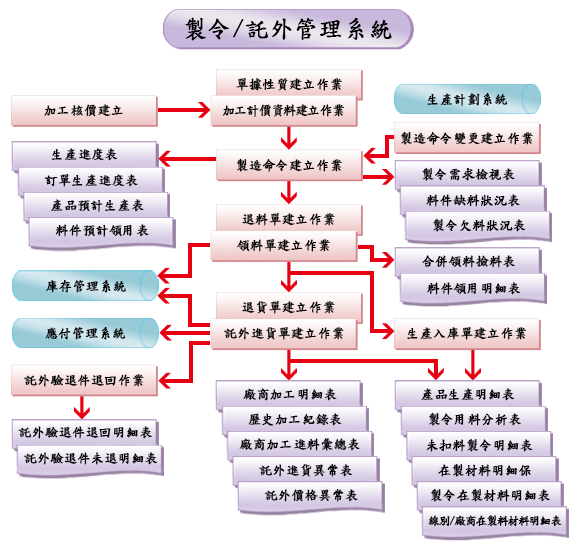
<style>
.page{position:relative;width:577px;height:545px;background:#ffffff}
.page>*{position:absolute;margin:0}
.t1{font:24px "DFKaiShu-SB-Estd-BF";color:#000000;font-weight:bold}
.t2{font:13.1px "DFKaiShu-SB-Estd-BF";color:#000000;font-weight:bold}
.t3{font:13.1px "DFKaiShu-SB-Estd-BF";letter-spacing:-0.1em;color:#000000;font-weight:bold}
.t4{font:11.5px "DFKaiShu-SB-Estd-BF";letter-spacing:-0.1em;color:#000000;font-weight:bold}
</style>
<div class="page">
<p class="t1" style="left:185px;top:17px;width:207px;height:24px">製令/託外管理系統</p>
<p class="t2" style="left:236px;top:78px;width:106px;height:13px">單據性質建立作業</p>
<p class="t2" style="left:427px;top:93px;width:81px;height:13px">生產計劃系統</p>
<p class="t2" style="left:44px;top:104px;width:79px;height:13px">加工核價建立</p>
<p class="t3" style="left:222px;top:104px;width:123px;height:13px">加工計價資料建立作業</p>
<p class="t2" style="left:400px;top:131px;width:133px;height:14px">製造命令變更建立作業</p>
<p class="t2" style="left:51px;top:148px;width:67px;height:13px">生產進度表</p>
<p class="t2" style="left:236px;top:158px;width:106px;height:14px">製造命令建立作業</p>
<p class="t2" style="left:44px;top:174px;width:94px;height:13px">訂單生產進度表</p>
<p class="t2" style="left:422px;top:167px;width:93px;height:14px">製令需求檢視表</p>
<p class="t2" style="left:426px;top:194px;width:94px;height:13px">料件缺料狀況表</p>
<p class="t2" style="left:50px;top:199px;width:94px;height:13px">產品預計生產表</p>
<p class="t2" style="left:242px;top:213px;width:93px;height:13px">退料單建立作業</p>
<p class="t2" style="left:433px;top:218px;width:93px;height:14px">製令欠料狀況表</p>
<p class="t2" style="left:55px;top:224px;width:94px;height:13px">料件預計領用表</p>
<p class="t2" style="left:236px;top:239px;width:94px;height:13px">領料單建立作業</p>
<p class="t2" style="left:422px;top:255px;width:93px;height:13px">合併領料撿料表</p>
<p class="t2" style="left:45px;top:280px;width:81px;height:13px">庫存管理系統</p>
<p class="t2" style="left:427px;top:282px;width:94px;height:13px">料件領用明細表</p>
<p class="t2" style="left:242px;top:301px;width:93px;height:13px">退貨單建立作業</p>
<p class="t2" style="left:45px;top:327px;width:81px;height:13px">應付管理系統</p>
<p class="t2" style="left:223px;top:327px;width:121px;height:13px">託外進貨單建立作業</p>
<p class="t2" style="left:407px;top:327px;width:120px;height:13px">生產入庫單建立作業</p>
<p class="t2" style="left:23px;top:374px;width:121px;height:13px">託外驗退件退回作業</p>
<p class="t2" style="left:243px;top:388px;width:94px;height:13px">廠商加工明細表</p>
<p class="t2" style="left:421px;top:388px;width:94px;height:13px">產品生產明細表</p>
<p class="t2" style="left:248px;top:413px;width:94px;height:13px">歷史加工紀錄表</p>
<p class="t2" style="left:428px;top:412px;width:93px;height:14px">製令用料分析表</p>
<p class="t2" style="left:18px;top:426px;width:134px;height:13px">託外驗退件退回明細表</p>
<p class="t2" style="left:239px;top:438px;width:121px;height:13px">廠商加工進料彙總表</p>
<p class="t2" style="left:426px;top:438px;width:107px;height:14px">未扣料製令明細表</p>
<p class="t2" style="left:23px;top:452px;width:135px;height:13px">託外驗退件未退明細表</p>
<p class="t2" style="left:259px;top:464px;width:94px;height:13px">託外進貨異常表</p>
<p class="t2" style="left:438px;top:463px;width:93px;height:14px">在製材料明細保</p>
<p class="t2" style="left:264px;top:489px;width:94px;height:13px">託外價格異常表</p>
<p class="t2" style="left:430px;top:488px;width:120px;height:14px">製令在製材料明細表</p>
<p class="t4" style="left:428px;top:515px;width:134px;height:12px">線別/廠商在製料材料明細表</p>
</div>
